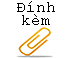
<style>
.page{position:relative;width:71px;height:58px;background:#ffffff}
.page>*{position:absolute;margin:0}
.t1{font:12px/13.3px "CourierNewPSMT";color:#000000}
</style>
<div class="page">
<p class="t1" style="left:17px;top:1px;width:38px;height:24px;text-align:center">Đính<br>kèm</p>
</div>
